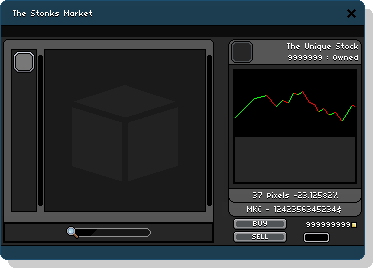
<style>
.page{position:relative;width:373px;height:268px}
.page>*{position:absolute;margin:0}
.t1{font:9px "04b03";color:#ffffff;scale:0.9 1}
</style>
<div class="page">
<p class="t1" style="left:13px;top:10px;width:79px;height:6px">The Stonks Market</p>
<p class="t1" style="left:287px;top:43px;width:71px;height:8px">The Unique Stock</p>
<p class="t1" style="left:288px;top:55px;width:70px;height:5px">9999999 : Owned</p>
<p class="t1" style="left:253px;top:192px;width:85px;height:6px">37 Pixels -23.12582%</p>
<p class="t1" style="left:247px;top:206px;width:94px;height:7px">MKC - 1242356345234$</p>
<p class="t1" style="left:306px;top:222px;width:44px;height:5px">999999999</p>
</div>
